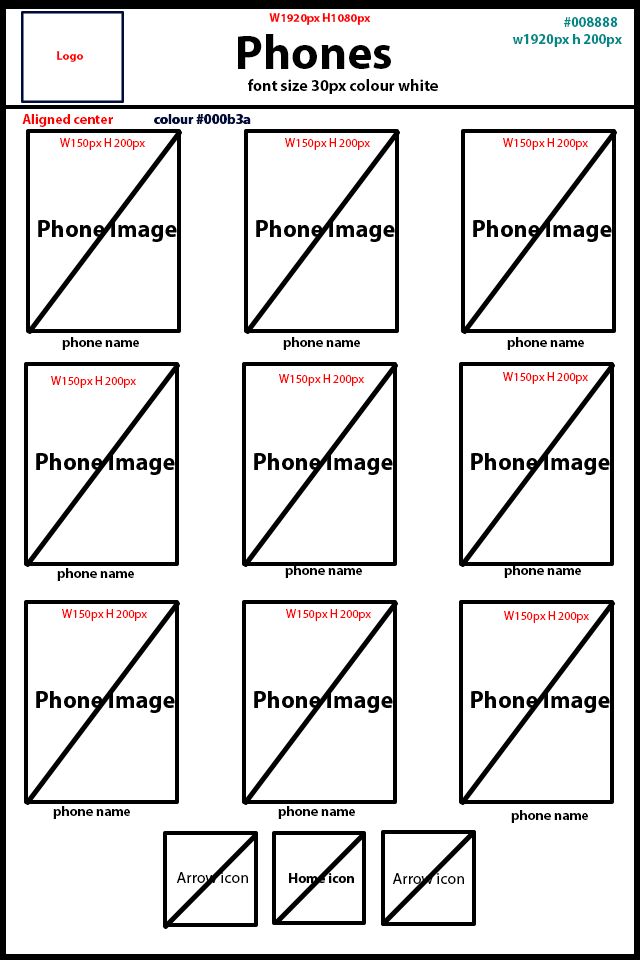
<style>
.page{position:relative;width:640px;height:960px;background:#ffffff}
.page>*{position:absolute;margin:0}
.t1{font:12px "MyriadPro-Bold";color:#ff0000}
.t2{font:14px "MyriadPro-Bold";color:#008888}
.t3{font:48px "MyriadPro-Bold";color:#000000}
.t4{font:16px "MyriadPro-Bold";color:#000000}
.t5{font:14px "MyriadPro-Bold";color:#ff0000}
.t6{font:14px "MyriadPro-Bold";color:#000b3a}
.t7{font:12px "MyriadPro-Regular";color:#ff0000}
.t8{font:14px "MyriadPro-Bold";color:#000000}
.t9{font:16px "MyriadPro-Regular";color:#000000}
</style>
<div class="page">
<p class="t1" style="left:269px;top:13px;width:102px;height:12px">W1920px H1080px</p>
<p class="t2" style="left:564px;top:17px;width:54px;height:10px">#008888</p>
<p class="t3" style="left:238px;top:34px;width:153px;height:35px">Phones</p>
<p class="t2" style="left:512px;top:34px;width:110px;height:13px">w1920px h 200px</p>
<p class="t1" style="left:57px;top:51px;width:27px;height:11px">Logo</p>
<p class="t4" style="left:248px;top:79px;width:190px;height:15px">font size 30px colour white</p>
<p class="t5" style="left:22px;top:114px;width:91px;height:13px">Aligned center</p>
<p class="t6" style="left:154px;top:114px;width:96px;height:10px">colour #000b3a</p>
<p class="t6" style="left:154px;top:114px;width:97px;height:10px">colour #000b3a</p>
<p class="t7" style="left:60px;top:138px;width:85px;height:12px">W150px H 200px</p>
<p class="t7" style="left:285px;top:138px;width:85px;height:12px">W150px H 200px</p>
<p class="t7" style="left:503px;top:138px;width:85px;height:12px">W150px H 200px</p>
<p class="t8" style="left:62px;top:337px;width:77px;height:13px">phone name</p>
<p class="t8" style="left:283px;top:337px;width:77px;height:13px">phone name</p>
<p class="t8" style="left:507px;top:337px;width:77px;height:13px">phone name</p>
<p class="t7" style="left:51px;top:376px;width:85px;height:12px">W150px H 200px</p>
<p class="t7" style="left:279px;top:374px;width:85px;height:12px">W150px H 200px</p>
<p class="t7" style="left:503px;top:372px;width:85px;height:12px">W150px H 200px</p>
<p class="t8" style="left:57px;top:568px;width:77px;height:13px">phone name</p>
<p class="t8" style="left:285px;top:565px;width:77px;height:13px">phone name</p>
<p class="t8" style="left:504px;top:565px;width:77px;height:13px">phone name</p>
<p class="t7" style="left:62px;top:609px;width:85px;height:12px">W150px H 200px</p>
<p class="t7" style="left:286px;top:609px;width:85px;height:12px">W150px H 200px</p>
<p class="t7" style="left:504px;top:611px;width:85px;height:12px">W150px H 200px</p>
<p class="t8" style="left:53px;top:806px;width:77px;height:13px">phone name</p>
<p class="t8" style="left:278px;top:806px;width:77px;height:13px">phone name</p>
<p class="t8" style="left:511px;top:810px;width:77px;height:13px">phone name</p>
<p class="t9" style="left:176px;top:872px;width:72px;height:11px">Arrow icon</p>
<p class="t9" style="left:392px;top:873px;width:72px;height:11px">Arrow icon</p>
</div>
